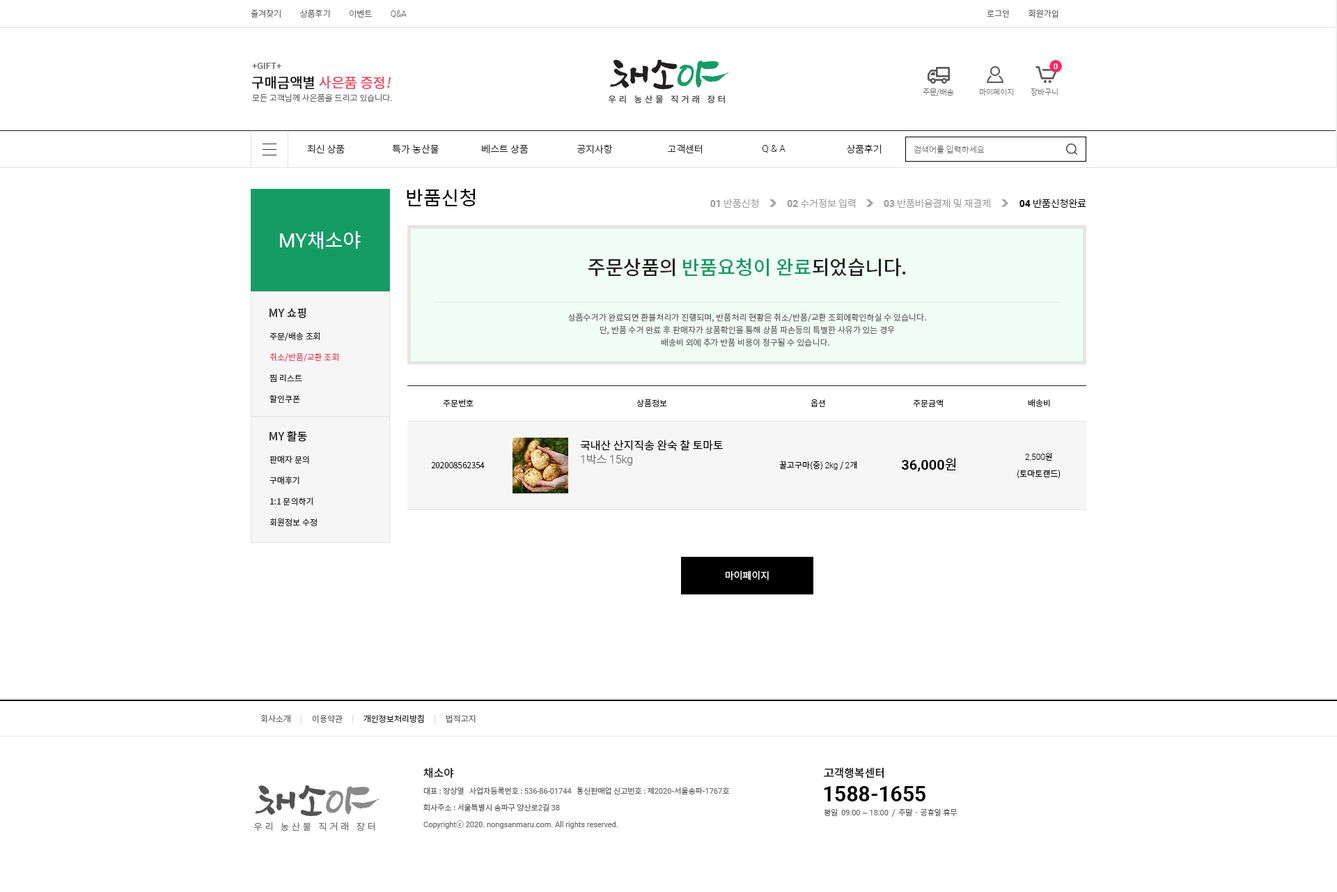
<style>
.page{position:relative;width:1337px;height:892px;background:#ffffff}
.page>*{position:absolute;margin:0}
.t1{font:8.4px "NotoSansCJKkr-Light";color:#666666}
.t2{font:8.4px "Roboto-Light";color:#666666}
.t3{font:8.4px "NotoSansCJKkr-DemiLight";color:#666666}
.t4{font:9.1px "Roboto-Medium";color:#666666}
.t5{font:13.9px "NotoSansCJKkr-Medium";color:#ea475c}
.t6{font:13.9px "NotoSansCJKkr-Medium";color:#000000}
.t7{font:13.9px "NotoSansCJKkr-Medium";color:#ea475c;font-style:italic}
.t8{font:7.7px "NotoSansCJKkr-Thin";color:#666666}
.t9{font:9.8px "NotoSansCJKkr-Light";color:#222222}
.t10{font:9.8px "Roboto-Light";color:#222222}
.t11{font:8.4px "NotoSansCJKkr-Thin";color:#666666}
.t12{font:19.5px "NotoSansCJKkr-Regular";color:#000000}
.t13{font:9.8px "NotoSansCJKkr-Light";color:#999999}
.t14{font:9.8px "Roboto-Bold";color:#999999}
.t15{font:9.8px "NotoSansCJKkr-Light";color:#000000}
.t16{font:9.8px "Roboto-Bold";color:#000000}
.t17{font:19.5px "NotoSansCJKkr-Regular";color:#ffffff}
.t18{font:19.5px "Roboto-Regular";color:#ffffff}
.t19{font:19.5px "NotoSansCJKkr-Medium";color:#159c65}
.t20{font:19.5px "NotoSansCJKkr-Medium";color:#222222}
.t21{font:11.1px "NotoSansCJKkr-Medium";color:#222222}
.t22{font:8.4px/12.5px "NotoSansCJKkr-Regular";color:#666666}
.t23{font:8.4px/20.9px "NotoSansCJKkr-Regular";color:#ea475c}
.t24{font:8.4px/20.9px "NotoSansCJKkr-Regular";color:#222222}
.t25{font:8.4px "NotoSansCJKkr-Regular";color:#222222}
.t26{font:11.1px "NotoSansCJKkr-Regular";color:#000000}
.t27{font:8.4px "NotoSansCJKkr-Light";color:#000000}
.t28{font:11.1px "Roboto-Light";color:#666666}
.t29{font:11.1px "NotoSansCJKkr-Light";color:#666666}
.t30{font:8.4px "Roboto-Light";color:#000000}
.t31{font:13.9px "Roboto-Bold";color:#000000}
.t32{font:13.9px "NotoSansCJKkr-DemiLight";color:#000000}
.t33{font:8.4px/16.7px "NotoSansCJKkr-Light";color:#000000}
.t34{font:8.4px/16.7px "Roboto-Light";color:#000000}
.t35{font:9.8px "NotoSansCJKkr-DemiLight";color:#ffffff}
</style>
<div class="page">
<p class="t1" style="left:251px;top:9px;width:156px;height:9px">즐겨찾기          상품후기          이벤트          <span class="t2">Q&amp;A</span></p>
<p class="t3" style="left:987px;top:9px;width:72px;height:9px">로그인          회원가입</p>
<p class="t4" style="left:252px;top:63px;width:29px;height:6px">+GIFT+</p>
<p class="t5" style="left:252px;top:76px;width:139px;height:13px"><span class="t6">구매금액별 </span>사은품 증정<span class="t7">!</span></p>
<p class="t8" style="left:923px;top:88px;width:31px;height:8px">주문/배송</p>
<p class="t8" style="left:979px;top:88px;width:35px;height:8px">마이페이지</p>
<p class="t8" style="left:1031px;top:88px;width:27px;height:8px">장바구니</p>
<p class="t1" style="left:252px;top:93px;width:140px;height:9px">모든 고객님께 사은품을 드리고 있습니다.</p>
<p class="t9" style="left:307px;top:144px;width:38px;height:9px">최신 상품</p>
<p class="t9" style="left:392px;top:144px;width:47px;height:10px">특가 농산물</p>
<p class="t9" style="left:482px;top:144px;width:47px;height:10px">베스트 상품</p>
<p class="t9" style="left:577px;top:144px;width:36px;height:10px">공지사항</p>
<p class="t9" style="left:668px;top:144px;width:35px;height:10px">고객센터</p>
<p class="t10" style="left:763px;top:145px;width:23px;height:8px">Q &amp; A</p>
<p class="t9" style="left:847px;top:144px;width:35px;height:10px">상품후기</p>
<p class="t11" style="left:914px;top:145px;width:71px;height:9px">검색어를 입력하세요</p>
<p class="t12" style="left:407px;top:188px;width:68px;height:19px">반품신청</p>
<p class="t13" style="left:710px;top:199px;width:49px;height:9px"><span class="t14">01</span> 반품신청</p>
<p class="t13" style="left:787px;top:199px;width:69px;height:9px"><span class="t14">02</span> 수거정보 입력</p>
<p class="t13" style="left:884px;top:199px;width:107px;height:9px"><span class="t14">03</span> 반품비용결제 및 재결제</p>
<p class="t15" style="left:1020px;top:199px;width:67px;height:9px"><span class="t16">04</span> 반품신청완료</p>
<p class="t17" style="left:280px;top:231px;width:81px;height:18px"><span class="t18">MY</span>채소야</p>
<p class="t19" style="left:589px;top:258px;width:317px;height:19px"><span class="t20">주문상품의 </span>반품요청이 완료<span class="t20">되었습니다.</span></p>
<p class="t21" style="left:270px;top:307px;width:36px;height:11px">MY 쇼핑</p>
<p class="t22" style="left:568px;top:313px;width:358px;height:34px;text-align:center">상품수거가 완료되면 환불처리가 진행되며, 반품처리 현황은 취소/반품/교환 조회에확인하실 수 있습니다.<br>단, 반품 수거 완료 후 판매자가 상품확인을 통해 상품 파손등의 특별한 사유가 있는 경우<br>배송비 외에 추가 반품 비용이 청구될 수 있습니다.</p>
<p class="t23" style="left:270px;top:332px;width:69px;height:71px"><span class="t24">주문/배송 조회<br></span>취소/반품/교환 조회<br><span class="t24">찜 리스트<br>할인쿠폰</span></p>
<p class="t25" style="left:443px;top:399px;width:31px;height:8px">주문번호</p>
<p class="t25" style="left:637px;top:399px;width:30px;height:8px">상품정보</p>
<p class="t25" style="left:811px;top:399px;width:14px;height:8px">옵션</p>
<p class="t25" style="left:913px;top:399px;width:30px;height:8px">주문금액</p>
<p class="t25" style="left:1028px;top:398px;width:22px;height:9px">배송비</p>
<p class="t21" style="left:270px;top:430px;width:37px;height:12px">MY 활동</p>
<p class="t26" style="left:580px;top:440px;width:143px;height:11px">국내산 산지직송 완숙 찰 토마토</p>
<p class="t24" style="left:270px;top:455px;width:47px;height:71px">판매자 문의<br>구매후기<br>1:1 문의하기<br>회원정보 수정</p>
<p class="t27" style="left:431px;top:462px;width:54px;height:6px">202008562354</p>
<p class="t28" style="left:581px;top:454px;width:51px;height:11px">1<span class="t29">박스 </span>15kg</p>
<p class="t27" style="left:779px;top:460px;width:78px;height:10px">꿀고구마(중) <span class="t30">2kg</span> / <span class="t30">2</span>개</p>
<p class="t31" style="left:901px;top:458px;width:55px;height:14px">36,000<span class="t32">원</span></p>
<p class="t33" style="left:1018px;top:452px;width:43px;height:27px;text-align:center"><span class="t34">2,500</span>원<br>(토마토랜드)</p>
<p class="t35" style="left:726px;top:570px;width:43px;height:10px">마이페이지</p>
</div>
